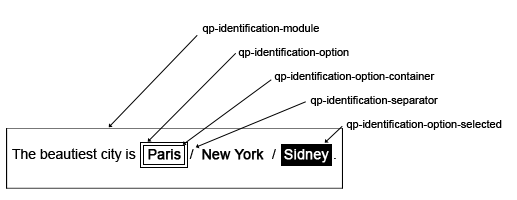
<style>
.page{position:relative;width:517px;height:200px;background:#ffffff}
.page>*{position:absolute;margin:0}
.t1{font:11px/24px "ArialMT";color:#000000}
.t2{font:14px "ArialMT";color:#000000}
.t3{font:14px "ArialMT";color:#000000;font-weight:bold}
.t4{font:14px "ArialMT";color:#ffffff;font-weight:bold}
</style>
<div class="page">
<p class="t1" style="left:202px;top:24px;width:300px;height:106px">qp-identification-module<br> qp-identification-option<br>  qp-identification-option-container<br>   qp-identification-separator<br>    qp-identification-option-selected</p>
<p class="t2" style="left:12px;top:148px;width:324px;height:15px">The beautiest city is   <span class="t3">Paris  </span>/  <span class="t3">New York  </span>/  <span class="t4">Sidney </span>.</p>
</div>
